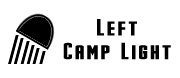
<style>
.page{position:relative;width:180px;height:78px;background:#ffffff}
.page>*{position:absolute;margin:0}
.t1{font:24px "Stark";letter-spacing:0.05em;color:#000000}
</style>
<div class="page">
<p class="t1" style="left:97px;top:19px;width:40px;height:17px">Left</p>
<p class="t1" style="left:63px;top:42px;width:108px;height:18px">Camp Light</p>
</div>
